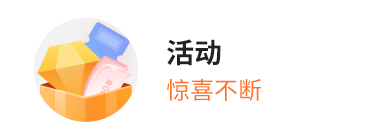
<style>
.page{position:relative;width:375px;height:140px;background:#ffffff}
.page>*{position:absolute;margin:0}
.t1{font:28px "SourceHanSansCN-Bold";color:#222222}
.t2{font:24px "SourceHanSansCN-Regular";color:#ff711f}
</style>
<div class="page">
<p class="t1" style="left:167px;top:39px;width:54px;height:27px">活动</p>
<p class="t2" style="left:167px;top:78px;width:94px;height:23px">惊喜不断</p>
</div>
